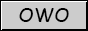
<style>
.page{position:relative;width:88px;height:31px;background:#cccccc}
.page>*{position:absolute;margin:0}
.t1{font:19.5px "ComicSansMS";color:#000000}
</style>
<div class="page">
<p class="t1" style="left:19px;top:8px;width:50px;height:14px">OWO</p>
</div>
